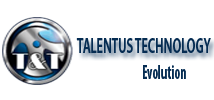
<style>
.page{position:relative;width:214px;height:100px;background:#ffffff}
.page>*{position:absolute;margin:0}
.t1{font:21px "MyriadPro-Semibold";color:#052c52;scale:0.59 1}
.t2{font:20px "MyriadPro-BoldCond";color:#052c52;scale:0.67 1}
</style>
<div class="page">
<p class="t1" style="left:76px;top:38px;width:135px;height:15px">TALENTUS TECHNOLOGY</p>
<p class="t2" style="left:143px;top:65px;width:43px;height:14px">Evolution</p>
</div>
